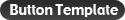
<style>
.page{position:relative;width:125px;height:20px}
.page>*{position:absolute;margin:0}
.t1{font:14px "GadgetRegular";color:#ffffff}
</style>
<div class="page">
<p class="t1" style="left:10px;top:4px;width:109px;height:13px">Button Template</p>
</div>
